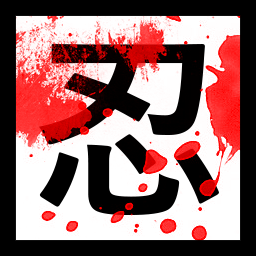
<style>
.page{position:relative;width:256px;height:256px;background:#000000}
.page>*{position:absolute;margin:0}
.t1{font:200px "YuGothicUI-Bold";color:#000000}
</style>
<div class="page">
<p class="t1" style="left:39px;top:44px;width:180px;height:171px">忍</p>
</div>
